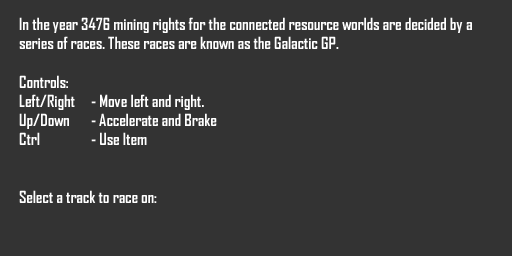
<style>
.page{position:relative;width:512px;height:256px;background:#333333}
.page>*{position:absolute;margin:0}
.t1{font:16px "AgencyFB-Bold";color:#ffffff}
</style>
<div class="page">
<p class="t1" style="left:19px;top:17px;width:453px;height:186px">In the year 3476 mining rights for the connected resource worlds are decided by a <br>series of races. These races are known as the Galactic GP.<br><br>Controls:<br>Left/Right - Move left and right.<br>Up/Down - Accelerate and Brake<br>Ctrl  - Use Item<br><br><br>Select a track to race on:</p>
</div>
